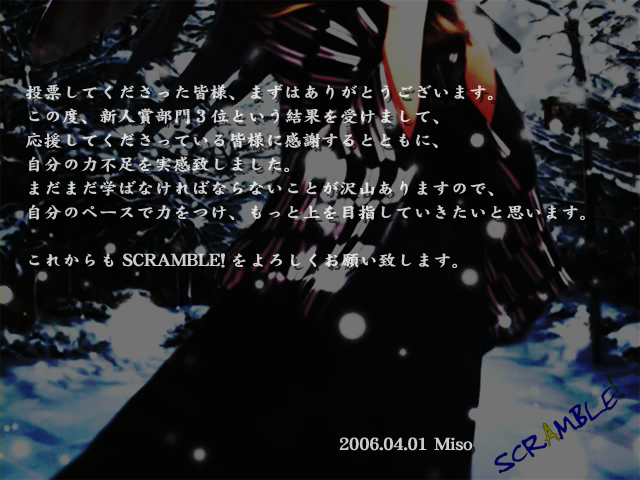
<style>
.page{position:relative;width:640px;height:480px}
.page>*{position:absolute;margin:0}
.t1{font:16.5px/24px "DFKaiSho-XB-WINP-RKSJ-H";color:#cbcbcb;font-weight:bold;scale:1.09 1}
.t2{font:16.5px "DFKaiSho-XB-WINP-RKSJ-H";color:#cacaca;font-weight:bold;scale:1.09 1}
</style>
<div class="page">
<p class="t1" style="left:25px;top:84px;width:560px;height:184px">投票してくださった皆様、まずはありがとうございます。<br>この度、新人賞部門3位という結果を受けまして、<br>応援してくださっている皆様に感謝するとともに、<br>自分の力不足を実感致しました。<br>まだまだ学ばなければならないことが沢山ありますので、<br>自分のペースで力をつけ、もっと上を目指していきたいと思います。<br><br>これからもSCRAMBLE!をよろしくお願い致します。</p>
<p class="t2" style="left:339px;top:437px;width:134px;height:14px">2006.04.01 Miso</p>
</div>
